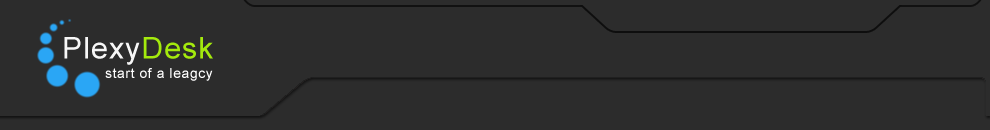
<style>
.page{position:relative;width:990px;height:130px;background:#2c2c2c}
.page>*{position:absolute;margin:0}
.t1{font:30px "ArialMT";letter-spacing:0.04em;color:#f7f7f7}
.t2{font:30px "ArialMT";letter-spacing:0.04em;color:#a4ea0d}
.t3{font:14px "ArialMT";letter-spacing:0.04em;color:#ffffff}
</style>
<div class="page">
<p class="t1" style="left:64px;top:37px;width:149px;height:28px">Plexy<span class="t2">Desk</span></p>
<p class="t3" style="left:105px;top:68px;width:108px;height:13px">start of a leagcy</p>
</div>
